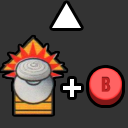
<style>
.page{position:relative;width:128px;height:128px;background:#333333}
.page>*{position:absolute;margin:0}
.t1{font:32px "FolkPro-Heavy";color:#ffffff}
</style>
<div class="page">
<p class="t1" style="left:63px;top:79px;width:18px;height:18px">+</p>
</div>
